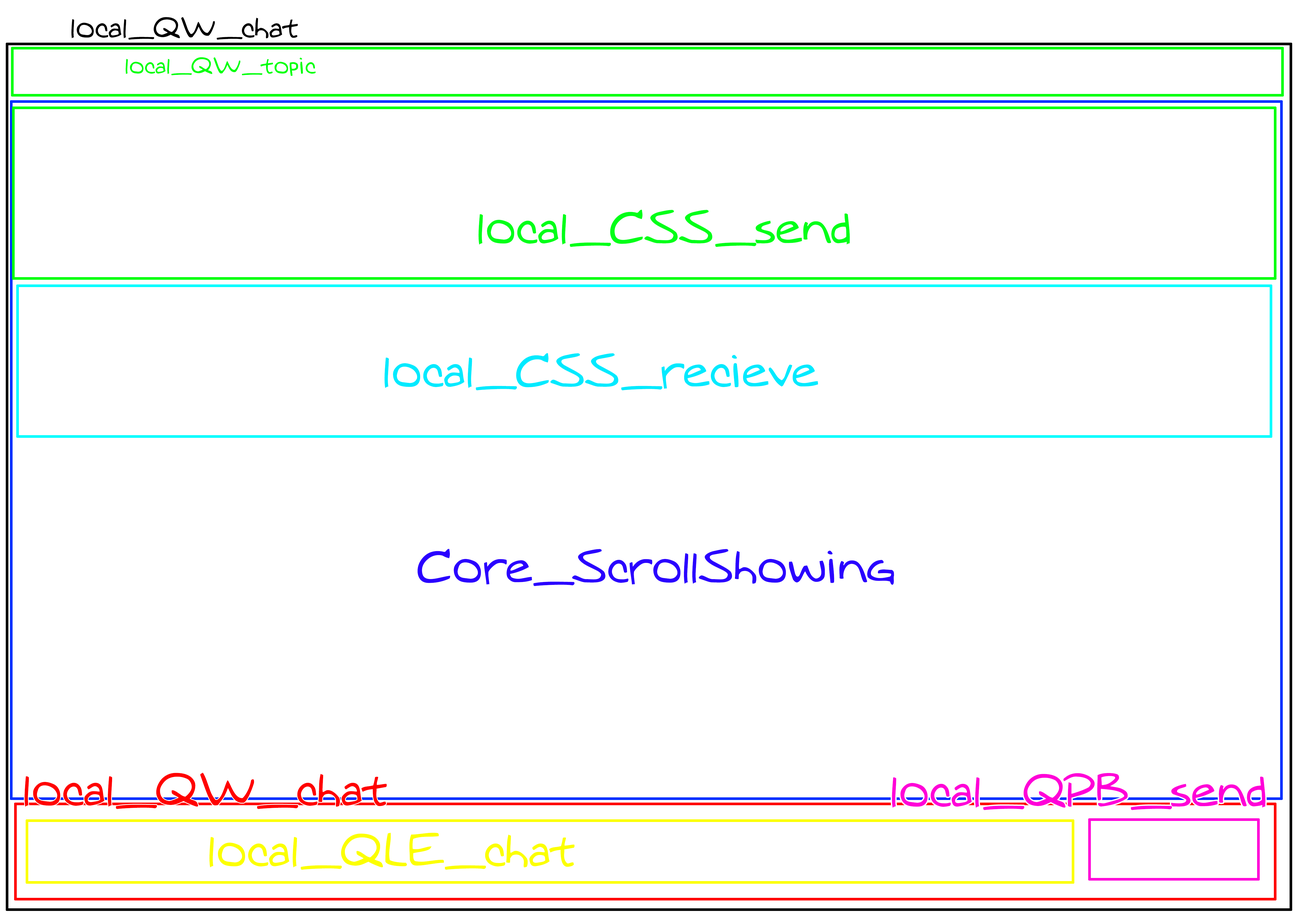
<style>
.page{position:relative;width:1299px;height:918px;background:#ffffff}
.page>*{position:absolute;margin:0}
.t1{font:27.3px "MTOaugie-Regular";color:#000000}
.t2{font:21.8px "MTOaugie-Regular";color:#00ff0c}
.t3{font:43.6px "MTOaugie-Regular";color:#00ff18}
.t4{font:43.6px "MTOaugie-Regular";color:#00eaff}
.t5{font:43.6px "MTOaugie-Regular";color:#2a00ff}
.t6{font:43.6px "MTOaugie-Regular";color:#ff0000}
.t7{font:43.6px "MTOaugie-Regular";color:#ff00d8}
.t8{font:43.6px "MTOaugie-Regular";color:#fcff00}
</style>
<div class="page">
<p class="t1" style="left:71px;top:17px;width:227px;height:23px">local_QW_chat</p>
<p class="t2" style="left:126px;top:57px;width:190px;height:19px">local_QW_topic</p>
<p class="t3" style="left:478px;top:210px;width:372px;height:37px">local_CSS_send</p>
<p class="t4" style="left:384px;top:353px;width:434px;height:38px">local_CSS_recieve</p>
<p class="t5" style="left:417px;top:549px;width:477px;height:37px">Core_ScrollShowing</p>
<p class="t6" style="left:25px;top:773px;width:362px;height:36px">local_QW_chat</p>
<p class="t7" style="left:892px;top:773px;width:373px;height:37px">local_QPB_send</p>
<p class="t8" style="left:209px;top:833px;width:365px;height:37px">local_QLE_chat</p>
</div>
